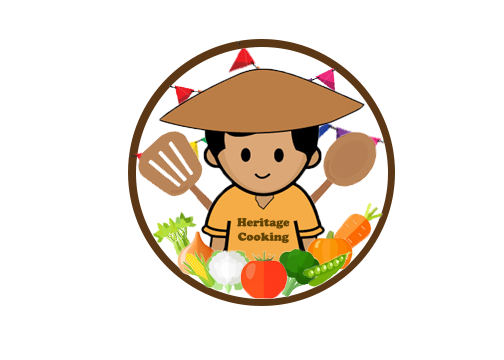
<style>
.page{position:relative;width:504px;height:360px;background:#ffffff}
.page>*{position:absolute;margin:0}
.t1{font:12px "CooperBlack";color:#624402}
</style>
<div class="page">
<p class="t1" style="left:237px;top:218px;width:53px;height:25px;text-align:center">Heritage Cooking</p>
</div>
